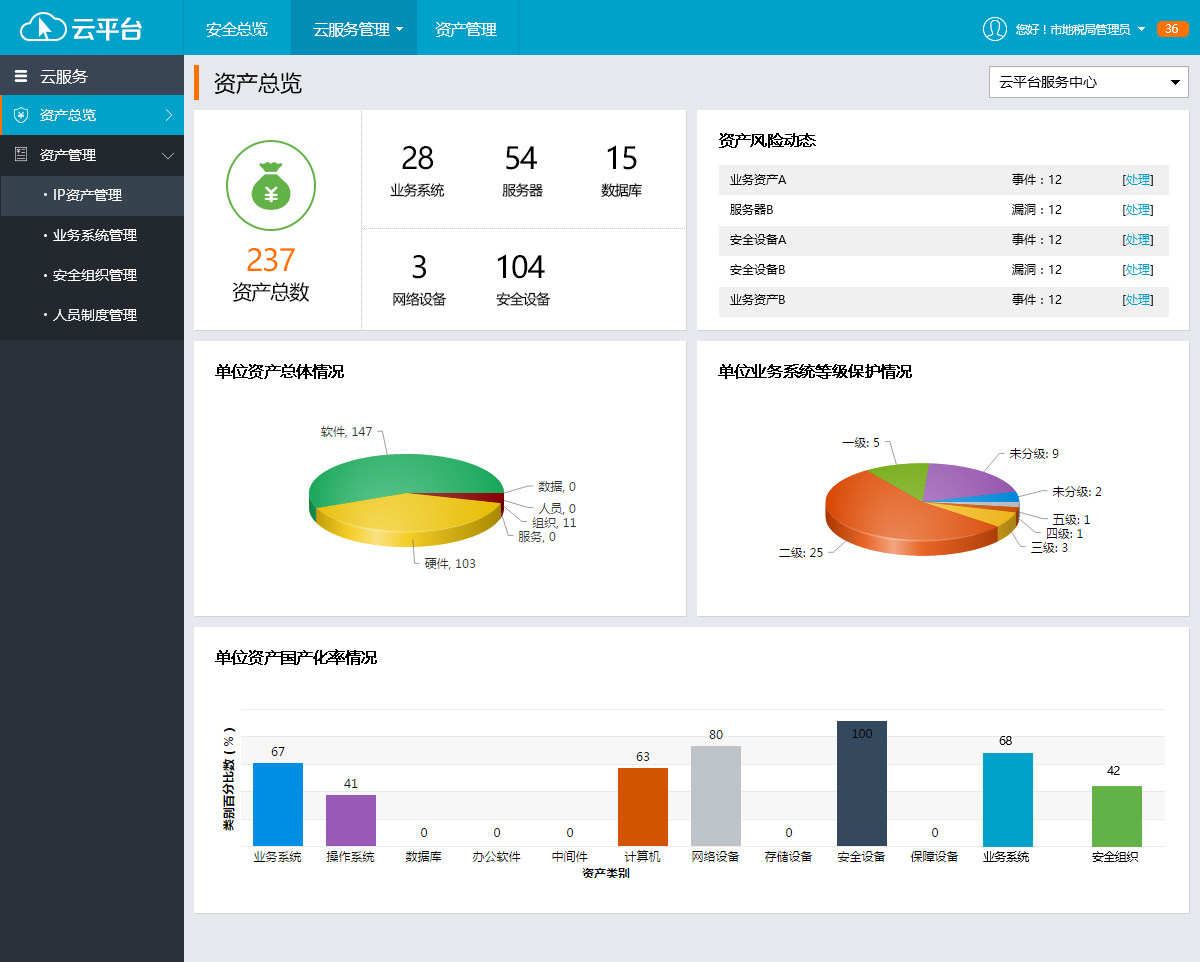
<style>
.page{position:relative;width:1200px;height:962px;background:#ffffff}
.page>*{position:absolute;margin:0}
.t1{font:25.4px "FZZZHONGJW--GB1-0";letter-spacing:-0.05em;color:#ffffff}
.t2{font:16px "MicrosoftYaHei";letter-spacing:-0.05em;color:#ffffff}
.t3{font:12px "MicrosoftYaHei";letter-spacing:-0.05em;color:#ffffff}
.t4{font:16px "MicrosoftYaHei";color:#ffffff}
.t5{font:22px "MicrosoftYaHei";color:#000000}
.t6{font:14px "MicrosoftYaHei";color:#000000}
.t7{font:14px "MicrosoftYaHei";color:#ffffff}
.t8{font:16px "MicrosoftYaHei";letter-spacing:-0.05em;color:#000000;font-weight:bold}
.t9{font:30px "MicrosoftYaHei";letter-spacing:-0.05em;color:#000000}
.t10{font:12px/30px "MicrosoftYaHei";color:#000000}
.t11{font:12px/30px "MicrosoftYaHei";color:#00a2ca}
.t12{font:14px "MicrosoftYaHei";letter-spacing:-0.05em;color:#000000}
.t13{font:14px/40px "MicrosoftYaHei";color:#ffffff}
.t14{font:30px "MicrosoftYaHei";letter-spacing:-0.05em;color:#ff7200}
.t15{font:20px "MicrosoftYaHei";letter-spacing:-0.05em;color:#000000}
.t16{font:12px "MicrosoftYaHei";letter-spacing:-0.05em;color:#000000}
</style>
<div class="page">
<p class="t1" style="left:72px;top:17px;width:70px;height:24px">云平台</p>
<p class="t2" style="left:206px;top:22px;width:291px;height:15px">安全总览           云服务管理           资产管理</p>
<p class="t3" style="left:1016px;top:24px;width:115px;height:11px">您好！市地税局管理员</p>
<p class="t3" style="left:1165px;top:24px;width:13px;height:9px">36</p>
<p class="t4" style="left:40px;top:69px;width:48px;height:15px">云服务</p>
<p class="t5" style="left:214px;top:72px;width:88px;height:22px">资产总览</p>
<p class="t6" style="left:999px;top:76px;width:98px;height:12px">云平台服务中心</p>
<p class="t7" style="left:40px;top:109px;width:56px;height:12px">资产总览</p>
<p class="t8" style="left:719px;top:133px;width:97px;height:15px">资产风险动态</p>
<p class="t7" style="left:40px;top:149px;width:56px;height:12px">资产管理</p>
<p class="t9" style="left:402px;top:146px;width:32px;height:24px">28</p>
<p class="t9" style="left:506px;top:146px;width:31px;height:24px">54</p>
<p class="t9" style="left:607px;top:145px;width:30px;height:25px">15</p>
<p class="t10" style="left:730px;top:174px;width:57px;height:131px">业务资产A<br>服务器B<br>安全设备A<br>安全设备B<br>业务资产B</p>
<p class="t10" style="left:1012px;top:173px;width:50px;height:132px">事件：12<br>漏洞：12<br>事件：12<br>漏洞：12<br>事件：12</p>
<p class="t10" style="left:1123px;top:174px;width:30px;height:132px">[<span class="t11">处理</span>]<br>[<span class="t11">处理</span>]<br>[<span class="t11">处理</span>]<br>[<span class="t11">处理</span>]<br>[<span class="t11">处理</span>]</p>
<p class="t12" style="left:390px;top:183px;width:55px;height:14px">业务系统</p>
<p class="t12" style="left:502px;top:183px;width:41px;height:14px">服务器</p>
<p class="t12" style="left:601px;top:183px;width:41px;height:15px">数据库</p>
<p class="t13" style="left:53px;top:189px;width:84px;height:132px">IP资产管理<br>业务系统管理<br>安全组织管理<br>人员制度管理</p>
<p class="t14" style="left:247px;top:248px;width:48px;height:24px">237</p>
<p class="t9" style="left:412px;top:255px;width:14px;height:24px">3</p>
<p class="t9" style="left:497px;top:254px;width:48px;height:25px">104</p>
<p class="t15" style="left:232px;top:282px;width:77px;height:20px">资产总数</p>
<p class="t12" style="left:393px;top:292px;width:54px;height:14px">网络设备</p>
<p class="t12" style="left:496px;top:292px;width:55px;height:14px">安全设备</p>
<p class="t8" style="left:215px;top:364px;width:129px;height:15px">单位资产总体情况</p>
<p class="t8" style="left:718px;top:364px;width:194px;height:15px">单位业务系统等级保护情况</p>
<p class="t8" style="left:215px;top:649px;width:162px;height:16px">单位资产国产化率情况</p>
<p class="t16" style="left:999px;top:736px;width:13px;height:9px">68</p>
<p class="t16" style="left:1107px;top:766px;width:13px;height:9px">42</p>
<p class="t16" style="left:983px;top:851px;width:46px;height:11px">业务系统</p>
<p class="t16" style="left:1092px;top:851px;width:47px;height:11px">安全组织</p>
</div>
